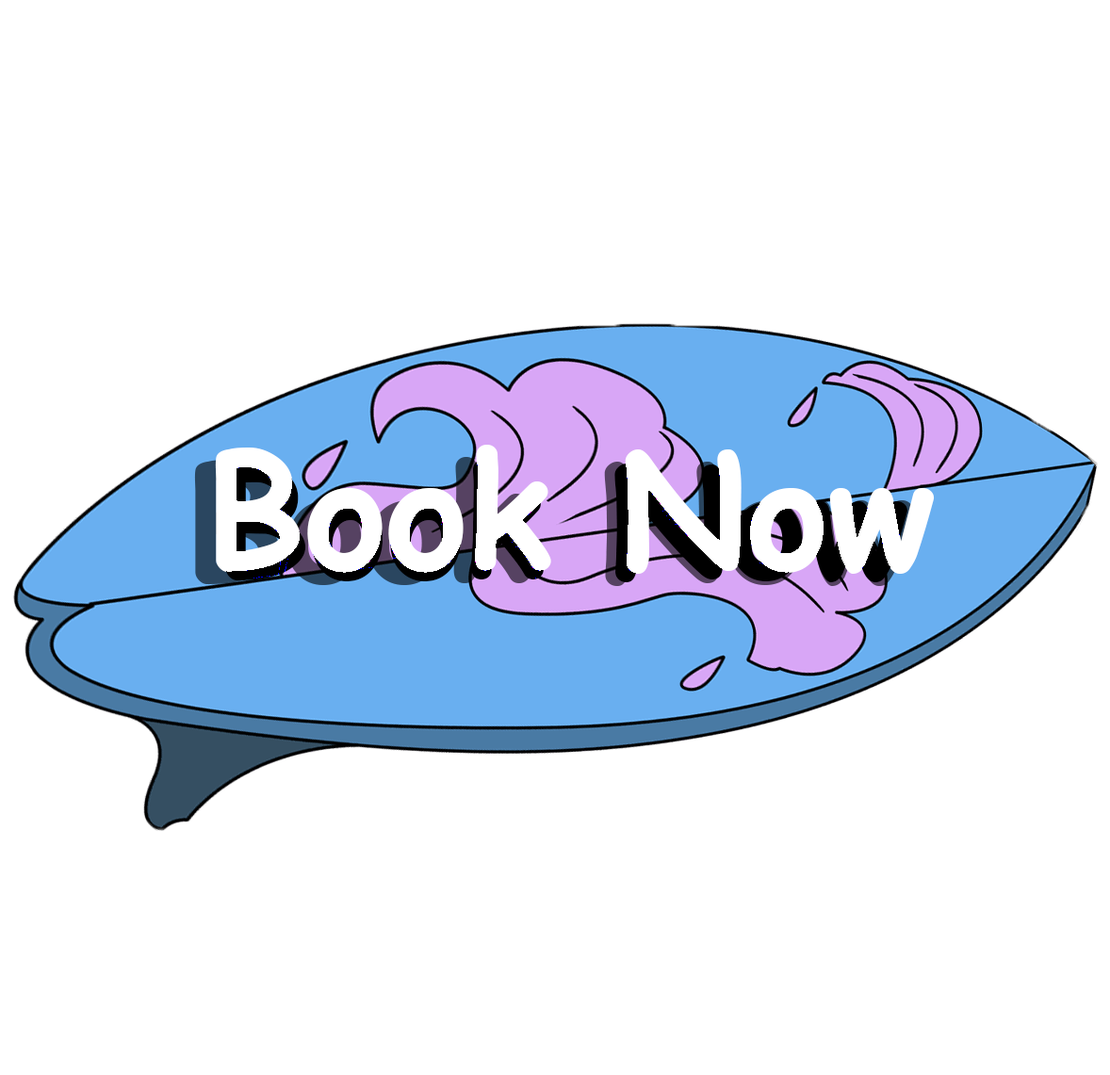
<style>
.page{position:relative;width:1110px;height:1075px;background:#ffffff}
.page>*{position:absolute;margin:0}
.t1{font:157px "ComicSansMS-Bold";letter-spacing:-0.005em;color:#ffffff}
</style>
<div class="page">
<p class="t1" style="left:215px;top:445px;width:719px;height:129px">Book Now</p>
</div>
